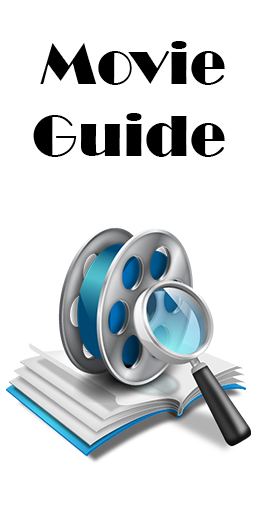
<style>
.page{position:relative;width:256px;height:506px;background:#ffffff}
.page>*{position:absolute;margin:0}
.t1{font:60px "Broadway";color:#000000}
</style>
<div class="page">
<p class="t1" style="left:33px;top:41px;width:192px;height:116px">Movie<br>Guide</p>
</div>
